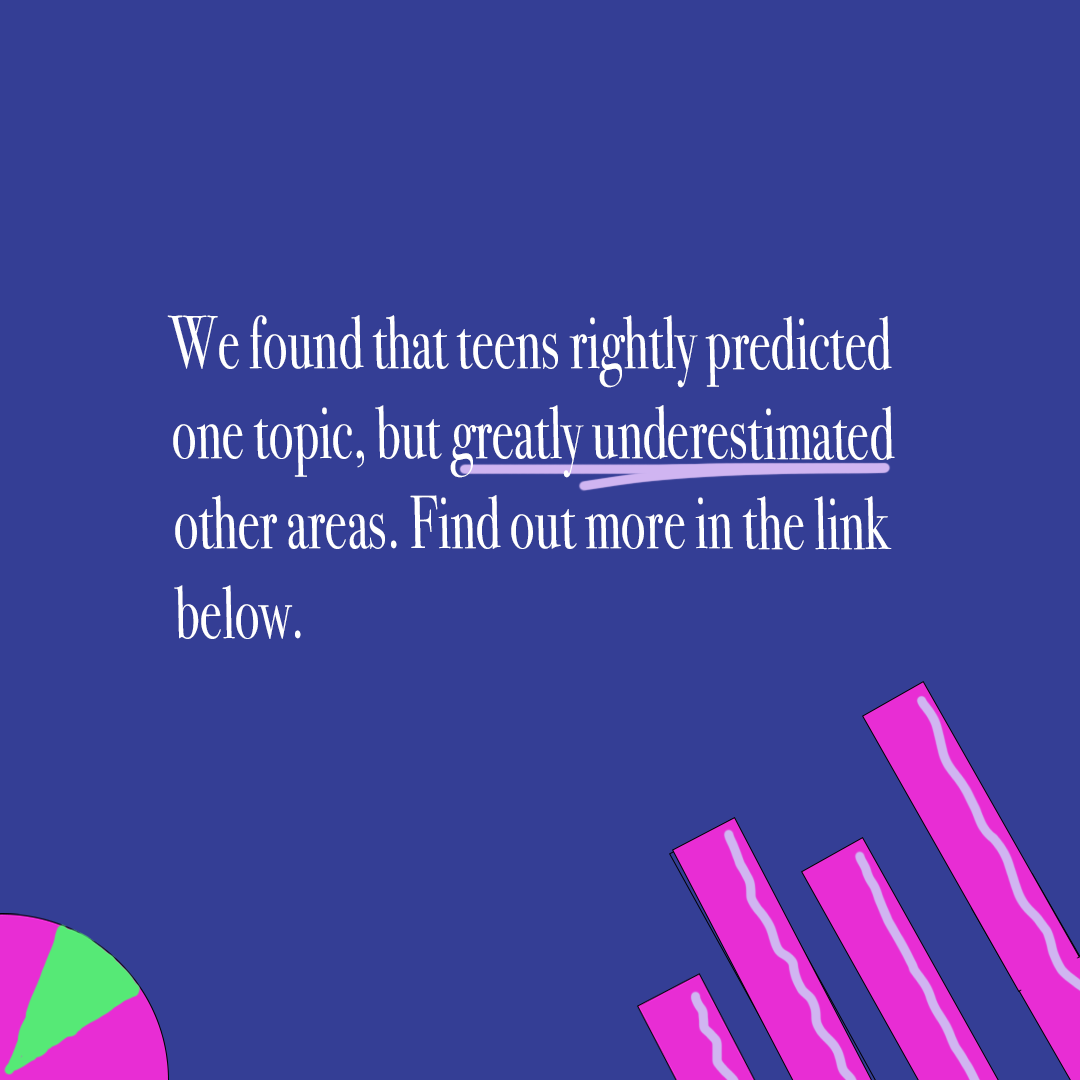
<style>
.page{position:relative;width:1080px;height:1080px;background:#343e95}
.page>*{position:absolute;margin:0}
.t1{font:75px "BodoniSvtyTwoITCTT-Book";color:#ffffff;scale:0.69 1}
</style>
<div class="page">
<p class="t1" style="left:167px;top:315px;width:728px;height:324px">We found that teens rightly predicted <br>one topic, but greatly underestimated <br>other areas. Find out more in the link <br>below.</p>
</div>
